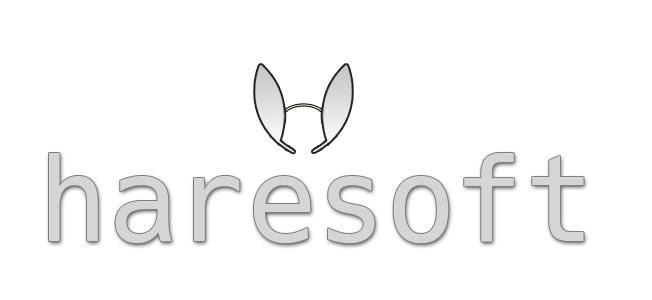
<style>
.page{position:relative;width:652px;height:300px;background:#ffffff}
.page>*{position:absolute;margin:0}
.t1{font:115.6px "Hack-Regular";color:#d5d5d5}
</style>
<div class="page">
<p class="t1" style="left:49px;top:153px;width:535px;height:90px">haresoft</p>
</div>
